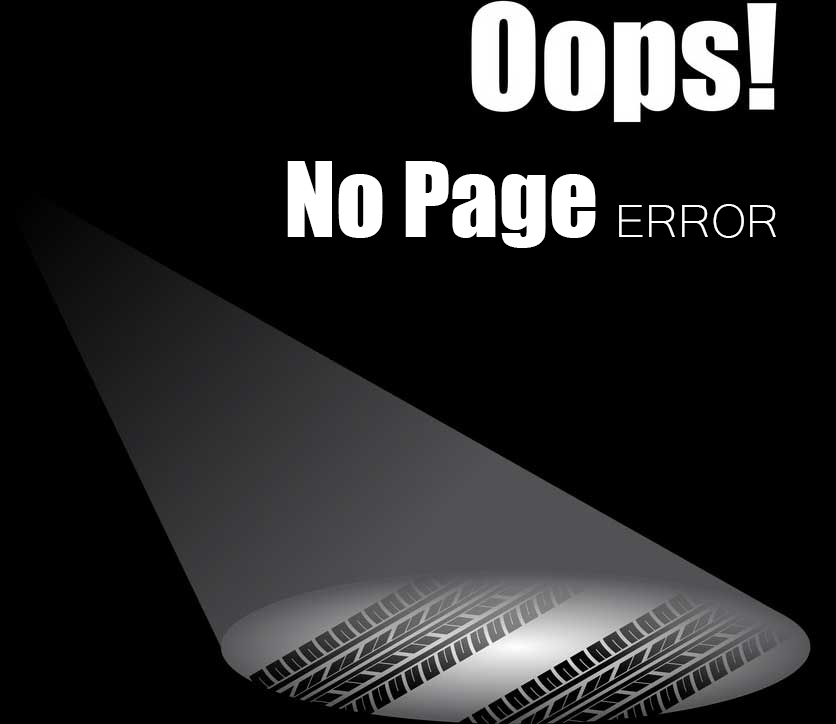
<style>
.page{position:relative;width:836px;height:724px;background:#000000}
.page>*{position:absolute;margin:0}
.t1{font:96px "Impact";color:#ffffff}
.t2{font:60px "Microsoft-Yi-Baiti";color:#ffffff}
</style>
<div class="page">
<p class="t1" style="left:287px;top:161px;width:489px;height:87px">No Page <span class="t2">ERROR</span></p>
</div>
